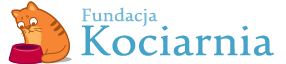
<style>
.page{position:relative;width:286px;height:64px;background:#ffffff}
.page>*{position:absolute;margin:0}
.t1{font:20px "UrduTypesetting";color:#72b9d7}
.t2{font:48px "UrduTypesetting";color:#45a3c9}
</style>
<div class="page">
<p class="t1" style="left:82px;top:7px;width:76px;height:20px">Fundacja</p>
<p class="t2" style="left:81px;top:25px;width:193px;height:31px">Kociarnia</p>
</div>
